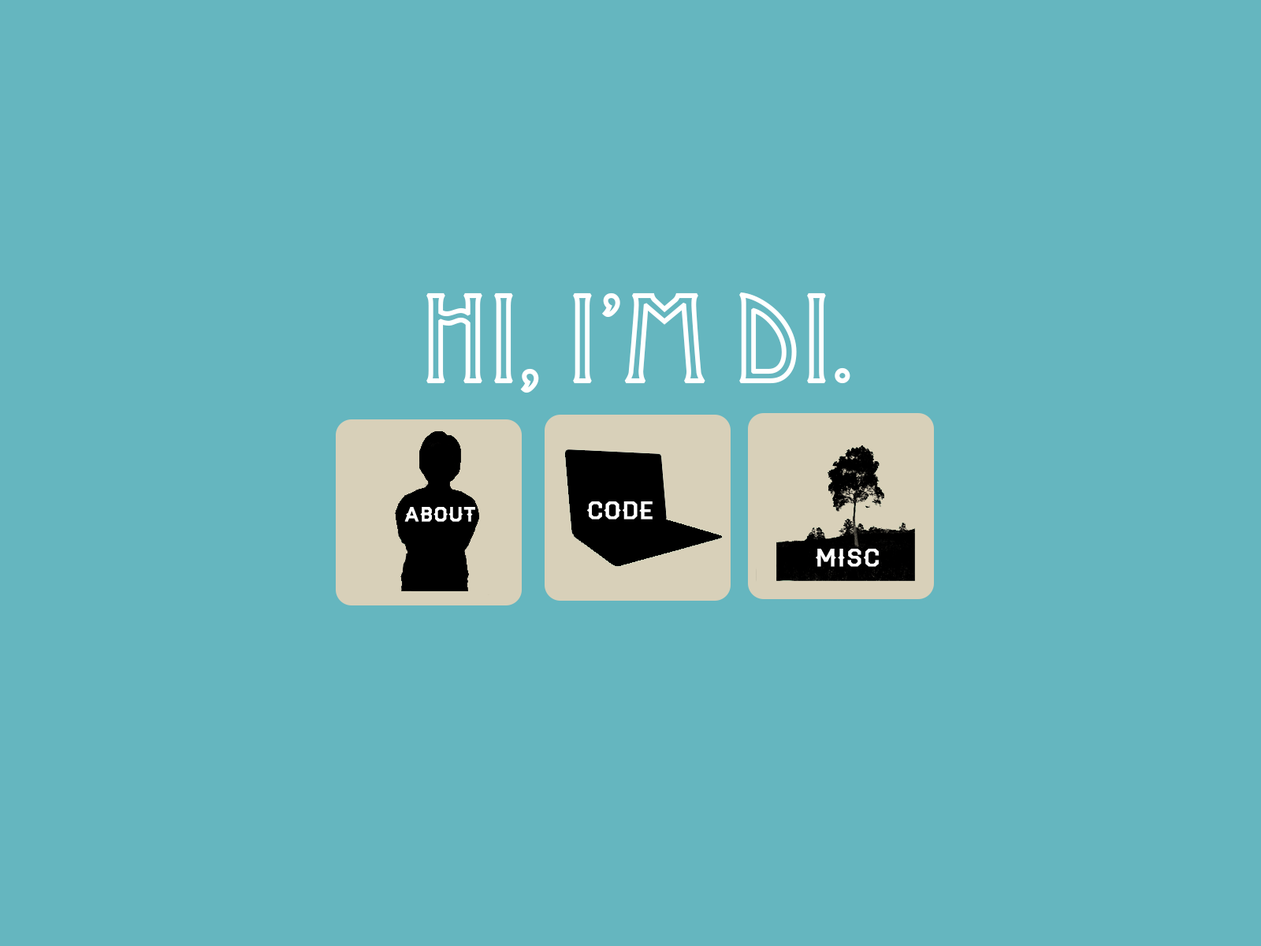
<style>
.page{position:relative;width:1261px;height:946px;background:#65b6bf}
.page>*{position:absolute;margin:0}
.t1{font:118.2px "Desdemona";color:#ffffff;font-weight:bold}
.t2{font:19.7px "Haymaker";color:#ffffff;font-weight:bold}
.t3{font:23.6px "Haymaker";color:#ffffff;font-weight:bold}
</style>
<div class="page">
<p class="t1" style="left:426px;top:292px;width:424px;height:101px">Hi, I’m Di.</p>
<p class="t2" style="left:404px;top:507px;width:71px;height:15px">about</p>
<p class="t3" style="left:587px;top:501px;width:66px;height:18px">code</p>
<p class="t3" style="left:816px;top:548px;width:63px;height:19px">misc</p>
</div>
